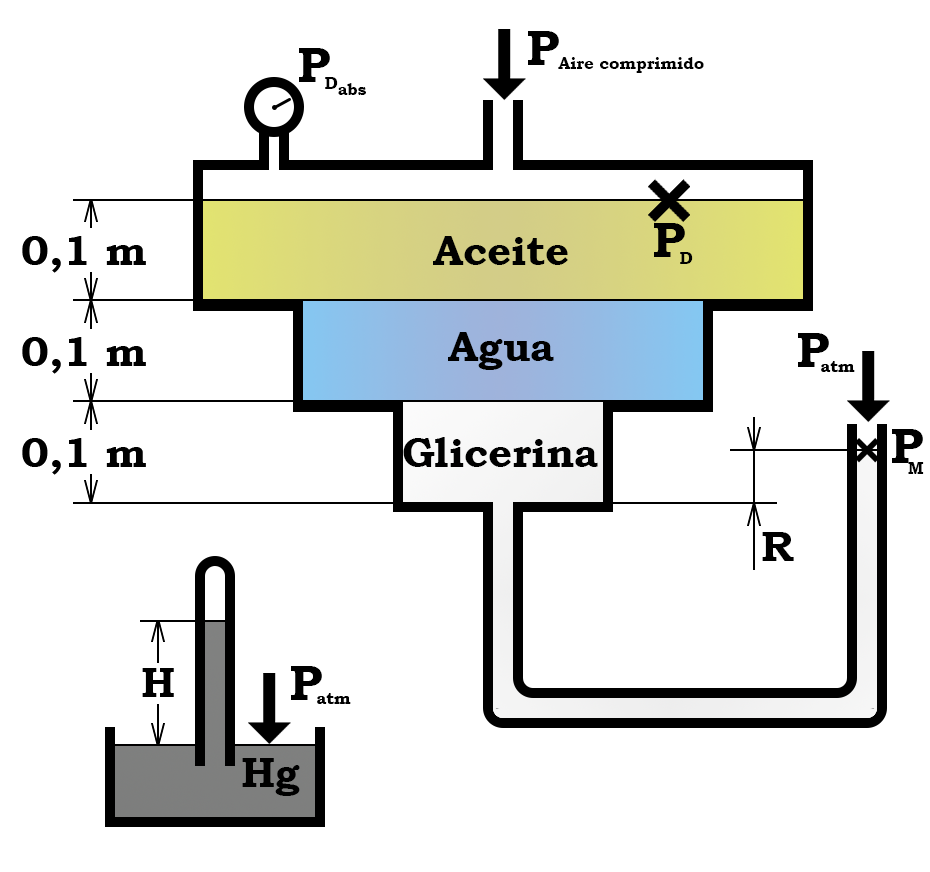
<style>
.page{position:relative;width:930px;height:872px;background:#ffffff}
.page>*{position:absolute;margin:0}
.t1{font:50px "BookmanOldStyle-Bold";color:#000000}
.t2{font:16.7px "BookmanOldStyle-Bold";color:#000000}
.t3{font:41.7px "BookmanOldStyle-Bold";color:#000000}
</style>
<div class="page">
<p class="t1" style="left:528px;top:31px;width:31px;height:34px">P</p>
<p class="t1" style="left:299px;top:48px;width:31px;height:34px">P</p>
<p class="t2" style="left:558px;top:57px;width:146px;height:16px">Aire comprimido</p>
<p class="t2" style="left:325px;top:77px;width:13px;height:12px">D</p>
<p class="t2" style="left:338px;top:83px;width:28px;height:12px">abs</p>
<p class="t1" style="left:654px;top:223px;width:31px;height:34px">P</p>
<p class="t3" style="left:433px;top:236px;width:135px;height:29px">Aceite</p>
<p class="t2" style="left:680px;top:252px;width:13px;height:12px">D</p>
<p class="t3" style="left:448px;top:332px;width:106px;height:38px">Agua</p>
<p class="t1" style="left:798px;top:333px;width:31px;height:34px">P</p>
<p class="t3" style="left:403px;top:437px;width:195px;height:30px">Glicerina</p>
<p class="t1" style="left:892px;top:429px;width:31px;height:34px">P</p>
<p class="t2" style="left:908px;top:462px;width:16px;height:12px">M</p>
<p class="t3" style="left:762px;top:532px;width:32px;height:29px">R</p>
<p class="t3" style="left:142px;top:668px;width:32px;height:29px">H</p>
<p class="t1" style="left:291px;top:666px;width:31px;height:34px">P</p>
<p class="t3" style="left:242px;top:758px;width:58px;height:38px">Hg</p>
</div>
